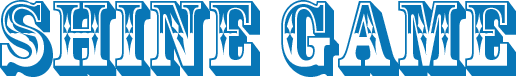
<style>
.page{position:relative;width:516px;height:77px;background:#ffffff}
.page>*{position:absolute;margin:0}
.t1{font:100px "RosewoodStd-Regular";color:#0876b6}
</style>
<div class="page">
<p class="t1" style="left:0px;top:0px;width:516px;height:77px">Shine Game</p>
</div>
